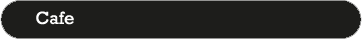
<style>
.page{position:relative;width:362px;height:39px;background:#1d1d1b}
.page>*{position:absolute;margin:0}
.t1{font:18px "Rockwell";color:#ffffff}
</style>
<div class="page">
<p class="t1" style="left:36px;top:11px;width:38px;height:14px">Cafe</p>
</div>
